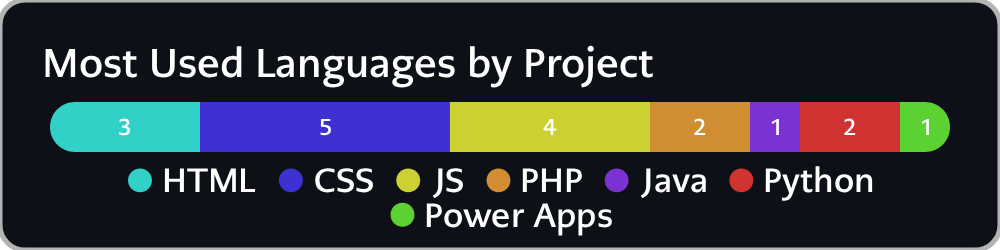
<style>
.page{position:relative;width:1000px;height:250px;background:#0d1117}
.page>*{position:absolute;margin:0}
.t1{font:39.9px "PMNCaeciliaSansText-Bd";color:#ffffff}
.t2{font:23px "PMNCaeciliaSansText-Bd";color:#ffffff}
.t3{font:33.5px "PMNCaeciliaSansText-Bd";color:#ffffff}
</style>
<div class="page">
<p class="t1" style="left:45px;top:45px;width:608px;height:43px">Most Used Languages by Project</p>
<p class="t2" style="left:119px;top:118px;width:12px;height:18px">3</p>
<p class="t2" style="left:320px;top:118px;width:11px;height:18px">5</p>
<p class="t2" style="left:543px;top:118px;width:14px;height:17px">4</p>
<p class="t2" style="left:694px;top:118px;width:12px;height:17px">2</p>
<p class="t2" style="left:771px;top:118px;width:8px;height:17px">1</p>
<p class="t2" style="left:844px;top:118px;width:12px;height:17px">2</p>
<p class="t2" style="left:921px;top:118px;width:8px;height:17px">1</p>
<p class="t3" style="left:164px;top:168px;width:92px;height:24px">HTML</p>
<p class="t3" style="left:315px;top:168px;width:58px;height:25px">CSS</p>
<p class="t3" style="left:432px;top:168px;width:31px;height:31px">JS</p>
<p class="t3" style="left:522px;top:168px;width:60px;height:24px">PHP</p>
<p class="t3" style="left:640px;top:168px;width:66px;height:31px">Java</p>
<p class="t3" style="left:765px;top:166px;width:108px;height:35px">Python</p>
<p class="t3" style="left:426px;top:203px;width:186px;height:33px">Power Apps</p>
</div>
